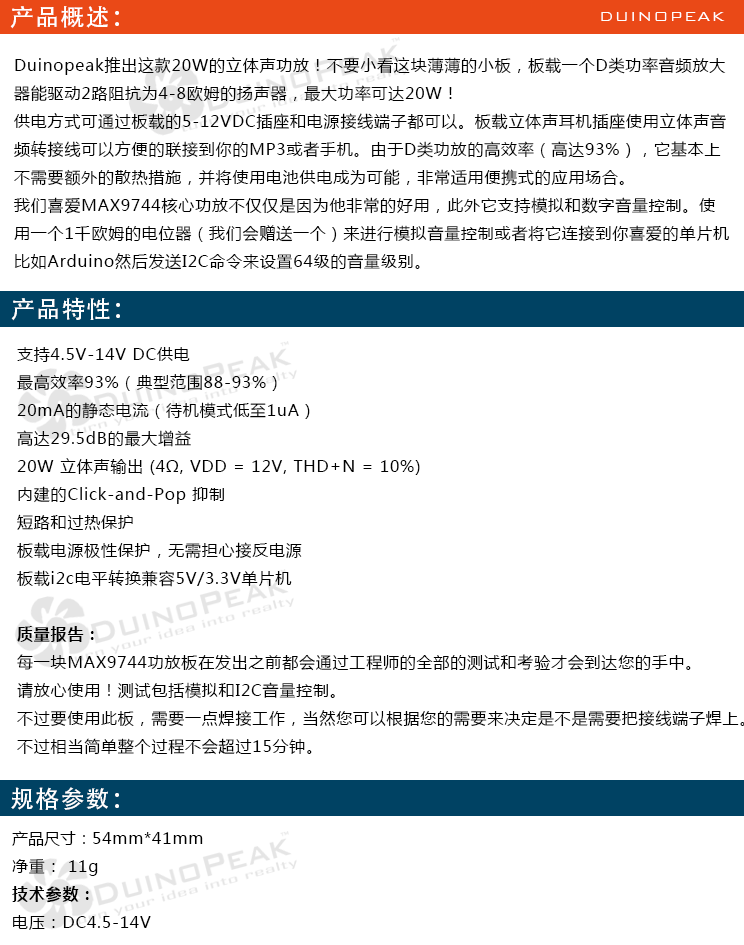
<style>
.page{position:relative;width:744px;height:945px;background:#ffffff}
.page>*{position:absolute;margin:0}
.t1{font:24px "AdobeHeitiStd-Regular";letter-spacing:0.05em;color:#ffffff}
.t2{font:18px "BankGothicBT-Light";letter-spacing:0.05em;color:#ffffff}
.t3{font:16px "MicrosoftYaHei";letter-spacing:0.05em;color:#000000}
.t4{font:16px "MicrosoftYaHei-Bold";letter-spacing:0.05em;color:#000000}
.t5{font:16px "MicrosoftYaHei";color:#000000}
</style>
<div class="page">
<p class="t1" style="left:10px;top:6px;width:109px;height:23px">产品概述：</p>
<p class="t2" style="left:601px;top:12px;width:124px;height:9px">DUINOPEAK</p>
<p class="t3" style="left:14px;top:57px;width:715px;height:213px">Duinopeak推出这款20W的立体声功放！不要小看这块薄薄的小板，板载一个D类功率音频放大<br>器能驱动2路阻抗为4-8欧姆的扬声器，最大功率可达20W！<br>供电方式可通过板载的5-12VDC插座和电源接线端子都可以。板载立体声耳机插座使用立体声音<br>频转接线可以方便的联接到你的MP3或者手机。由于D类功放的高效率（高达93%），它基本上<br>不需要额外的散热措施，并将使用电池供电成为可能，非常适用便携式的应用场合。<br>我们喜爱MAX9744核心功放不仅仅是因为他非常的好用，此外它支持模拟和数字音量控制。使<br>用一个1千欧姆的电位器（我们会赠送一个）来进行模拟音量控制或者将它连接到你喜爱的单片机<br>比如Arduino然后发送I2C命令来设置64级的音量级别。</p>
<p class="t1" style="left:11px;top:297px;width:109px;height:24px">产品特性：</p>
<p class="t3" style="left:17px;top:347px;width:728px;height:408px">支持4.5V-14V DC供电<br>最高效率93%（典型范围88-93%）<br>20mA的静态电流（待机模式低至1uA）<br>高达29.5dB的最大增益<br>20W 立体声输出 (4Ω, VDD = 12V, THD+N = 10%)<br>内建的Click-and-Pop 抑制<br>短路和过热保护<br>板载电源极性保护，无需担心接反电源<br>板载i2c电平转换兼容5V/3.3V单片机<br><br><span class="t4">质量报告：<br></span>每一块MAX9744功放板在发出之前都会通过工程师的全部的测试和考验才会到达您的手中。<br>请放心使用！测试包括模拟和I2C音量控制。<br>不过要使用此板，需要一点焊接工作，当然您可以根据您的需要来决定是不是需要把接线端子焊上。<br>不过相当简单整个过程不会超过15分钟。</p>
<p class="t1" style="left:11px;top:787px;width:108px;height:23px">规格参数：</p>
<p class="t3" style="left:12px;top:831px;width:191px;height:99px"><span class="t5">产品尺寸：</span>54mm*41mm<br>净重： 11g<br><span class="t4">技术参数：<br></span>电压：DC4.5-14V</p>
</div>
